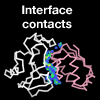
<style>
.page{position:relative;width:100px;height:100px;background:#000000}
.page>*{position:absolute;margin:0}
.t1{font:12px "HelveticaNeue-Bold";color:#ffffff}
</style>
<div class="page">
<p class="t1" style="left:22px;top:5px;width:51px;height:24px;text-align:center">Interface<br>contacts</p>
</div>
